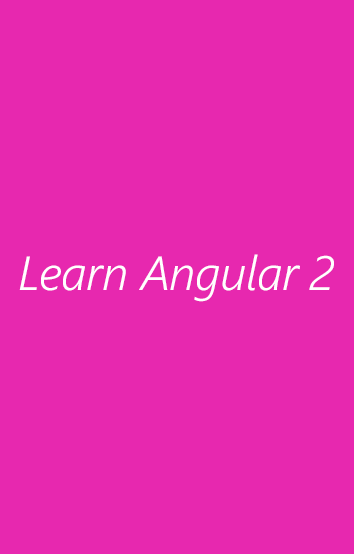
<style>
.page{position:relative;width:354px;height:554px;background:#e728af}
.page>*{position:absolute;margin:0}
.t1{font:48px "SegoeUI-SemilightItalic";letter-spacing:-0.01em;color:#ffffff}
</style>
<div class="page">
<p class="t1" style="left:19px;top:254px;width:315px;height:48px">Learn Angular 2</p>
</div>
